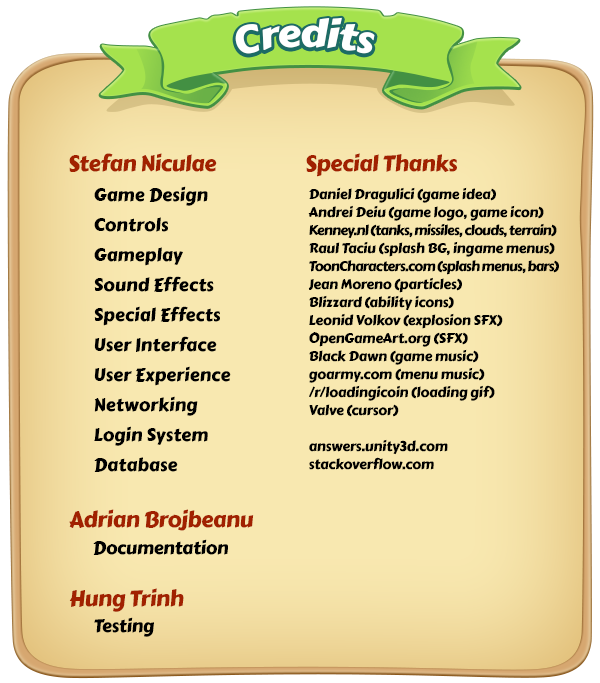
<style>
.page{position:relative;width:600px;height:683px;background:#f8e8b0}
.page>*{position:absolute;margin:0}
.t1{font:38px "CarterOne";letter-spacing:-0.02em;color:#ffffff}
.t2{font:22px "CarterOne";letter-spacing:-0.02em;color:#a12100}
.t3{font:18px/30px "CarterOne";color:#000000}
.t4{font:14px/18px "CarterOne";letter-spacing:-0.02em;color:#000000}
.t5{font:14px/18px "CarterOne";letter-spacing:-0.06em;color:#000000}
.t6{font:18px "CarterOne";letter-spacing:-0.02em;color:#000000}
</style>
<div class="page">
<p class="t1" style="left:235px;top:17px;width:140px;height:37px">Credits</p>
<p class="t2" style="left:69px;top:153px;width:148px;height:19px">Stefan Niculae</p>
<p class="t2" style="left:306px;top:153px;width:151px;height:24px">Special Thanks</p>
<p class="t3" style="left:94px;top:186px;width:137px;height:286px">Game Design<br>Controls<br>Gameplay<br>Sound Effects<br>Special Effects<br>User Interface<br>User Experience<br>Networking<br>Login System<br>Database</p>
<p class="t4" style="left:308px;top:187px;width:251px;height:283px">Daniel Dragulici (game idea)<br>Andrei Deiu (game logo, game icon)<br><span class="t5">Kenney.nl (tanks, missiles, clouds, terrain)</span><br>Raul Taciu (splash BG, ingame menus)<br><span class="t5">ToonCharacters.com (splash menus, bars)<br></span>Jean Moreno (particles)<br>Blizzard (ability icons)<br>Leonid Volkov (explosion SFX)<br>OpenGameArt.org (SFX)<br>Black Dawn (game music)<br>goarmy.com (menu music)<br>/r/loadingicoin (loading gif)<br>Valve (cursor)<br><br>answers.unity3d.com<br>stackoverflow.com</p>
<p class="t2" style="left:69px;top:509px;width:185px;height:22px">Adrian Brojbeanu</p>
<p class="t6" style="left:93px;top:539px;width:135px;height:16px">Documentation</p>
<p class="t2" style="left:69px;top:588px;width:115px;height:24px">Hung Trinh</p>
<p class="t6" style="left:94px;top:617px;width:60px;height:20px">Testing</p>
</div>
